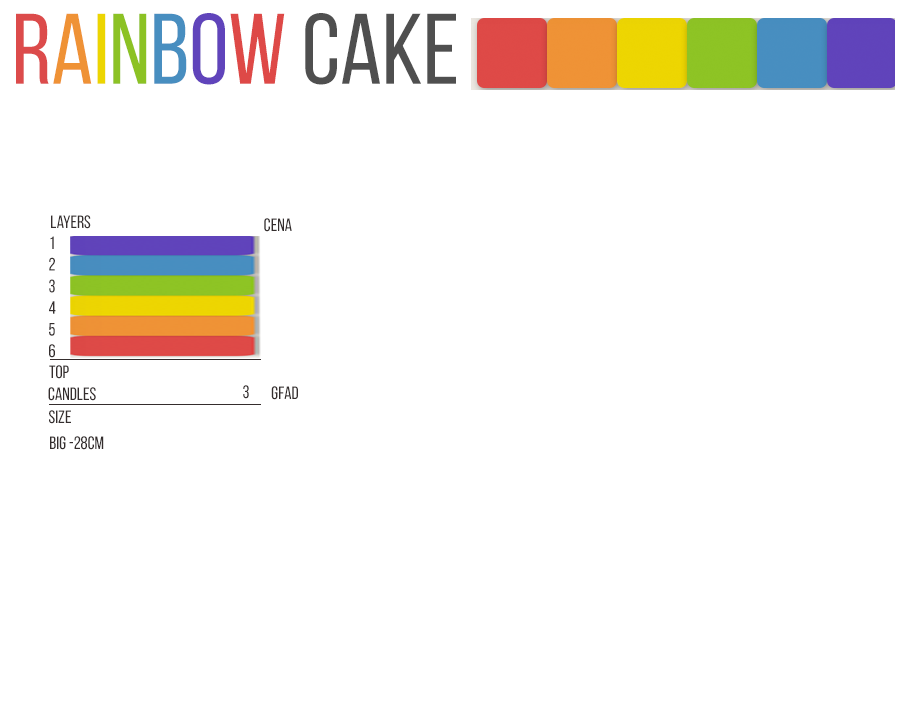
<style>
.page{position:relative;width:900px;height:720px;background:#ffffff}
.page>*{position:absolute;margin:0}
.t1{font:100px "BebasNeueRegular";color:#4f4f4f}
.t2{font:100px "BebasNeueRegular";color:#dc4b4b}
.t3{font:100px "BebasNeueRegular";color:#ef9236}
.t4{font:100px "BebasNeueRegular";color:#ecd501}
.t5{font:100px "BebasNeueRegular";color:#8cc224}
.t6{font:100px "BebasNeueRegular";color:#488ec0}
.t7{font:100px "BebasNeueRegular";color:#6044bb}
.t8{font:100px "BebasNeueRegular";color:#de4947}
.t9{font:18px "BebasNeueRegular";color:#342d2d}
</style>
<div class="page">
<p class="t1" style="left:16px;top:13px;width:440px;height:72px"><span class="t2">R</span><span class="t3">a</span><span class="t4">i</span><span class="t5">n</span><span class="t6">b</span><span class="t7">o</span><span class="t8">w </span>cake</p>
<p class="t9" style="left:51px;top:215px;width:40px;height:14px">Layers</p>
<p class="t9" style="left:264px;top:218px;width:28px;height:14px">Cena</p>
<p class="t9" style="left:49px;top:236px;width:7px;height:122px;text-align:center">1<br>2<br>3<br>4<br>5<br>6</p>
<p class="t9" style="left:49px;top:365px;width:20px;height:14px">Top</p>
<p class="t9" style="left:48px;top:387px;width:48px;height:14px">Candles</p>
<p class="t9" style="left:243px;top:385px;width:6px;height:14px">3</p>
<p class="t9" style="left:271px;top:386px;width:27px;height:14px">gfad</p>
<p class="t9" style="left:49px;top:410px;width:22px;height:14px">SIZE</p>
<p class="t9" style="left:50px;top:436px;width:54px;height:14px">BIG -28cm</p>
</div>
